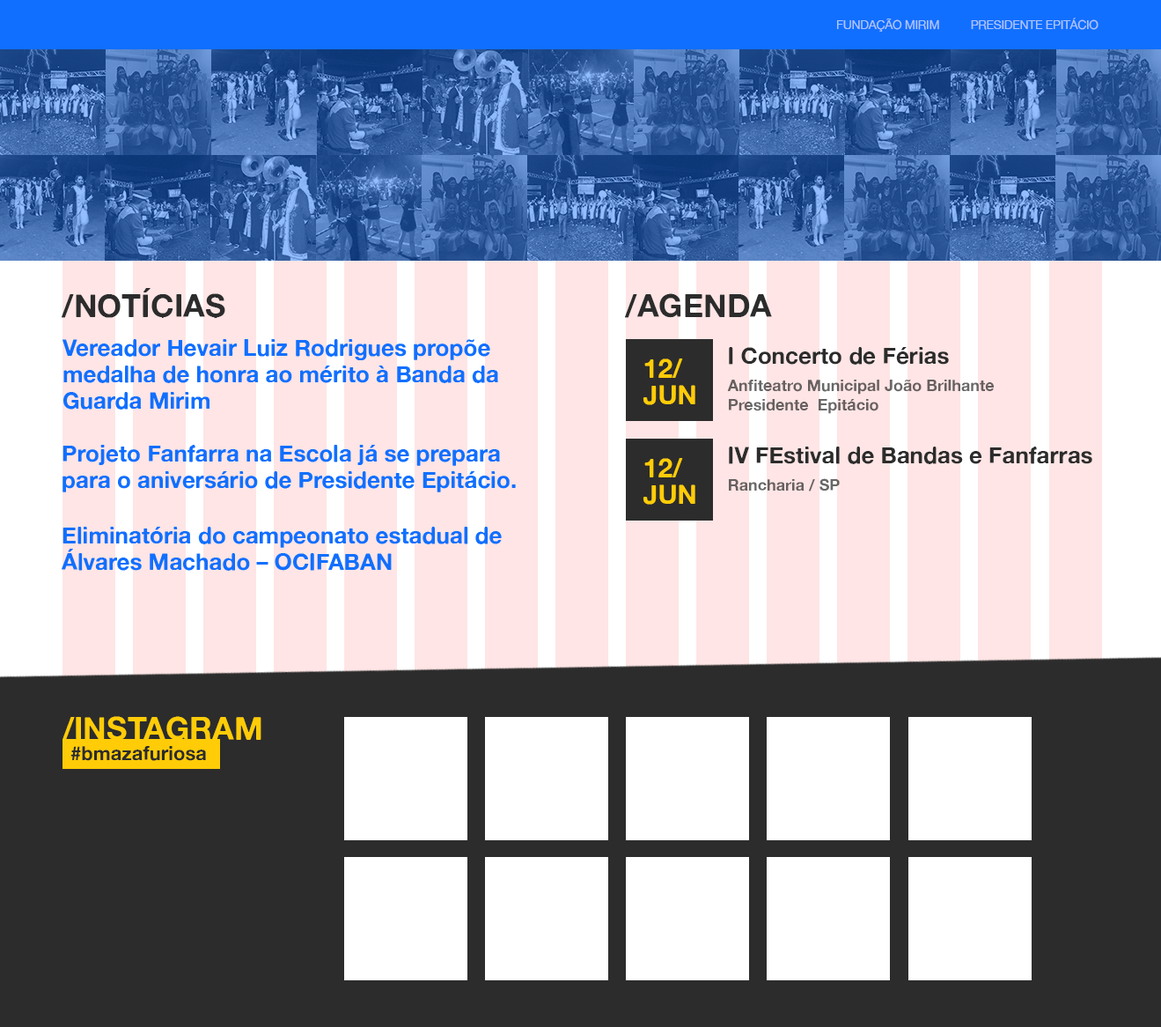
<style>
.page{position:relative;width:1161px;height:1027px;background:#ffffff}
.page>*{position:absolute;margin:0}
.t1{font:12.3px "AlteHaasGrotesk";letter-spacing:-0.025em;color:#adc5ff;text-transform:uppercase}
.t2{font:31.7px "AlteHaasGrotesk_Bold";color:#2c2c2c}
.t3{font:22.9px/26.4px "AlteHaasGrotesk_Bold";color:#116fff}
.t4{font:22.9px "AlteHaasGrotesk_Bold";color:#2c2c2c}
.t5{font:26.4px/26.4px "AlteHaasGrotesk_Bold";color:#ffcc07}
.t6{font:15.8px "AlteHaasGrotesk_Bold";color:#686060}
.t7{font:31.7px "AlteHaasGrotesk_Bold";color:#ffcc07}
.t8{font:19.4px "AlteHaasGrotesk_Bold";color:#2c2c2c}
</style>
<div class="page">
<p class="t1" style="left:837px;top:18px;width:262px;height:14px">FUNDAÇÃO MIRIM          PRESIDENTE EPITÁCIO</p>
<p class="t2" style="left:62px;top:288px;width:163px;height:30px">/NOTÍCIAS</p>
<p class="t2" style="left:625px;top:293px;width:147px;height:25px">/AGENDA</p>
<p class="t3" style="left:63px;top:339px;width:435px;height:70px">Vereador Hevair Luiz Rodrigues propõe medalha de honra ao mérito à Banda da Guarda Mirim</p>
<p class="t4" style="left:729px;top:347px;width:220px;height:18px">I Concerto de Férias</p>
<p class="t5" style="left:643px;top:358px;width:53px;height:47px">12/<br>JUN</p>
<p class="t6" style="left:727px;top:380px;width:267px;height:34px">Anfiteatro Municipal João Brilhante<br>Presidente  Epitácio</p>
<p class="t3" style="left:63px;top:445px;width:453px;height:47px">Projeto Fanfarra na Escola já se prepara para o aniversário de Presidente Epitácio.</p>
<p class="t4" style="left:729px;top:446px;width:364px;height:18px">IV FEstival de Bandas e Fanfarras</p>
<p class="t5" style="left:643px;top:458px;width:53px;height:47px">12/<br>JUN</p>
<p class="t6" style="left:729px;top:478px;width:111px;height:13px">Rancharia / SP</p>
<p class="t3" style="left:62px;top:527px;width:440px;height:44px">Eliminatória do campeonato estadual de Álvares Machado – OCIFABAN</p>
<p class="t7" style="left:63px;top:716px;width:199px;height:25px">/INSTAGRAM</p>
<p class="t8" style="left:70px;top:746px;width:136px;height:15px">#bmazafuriosa</p>
</div>
